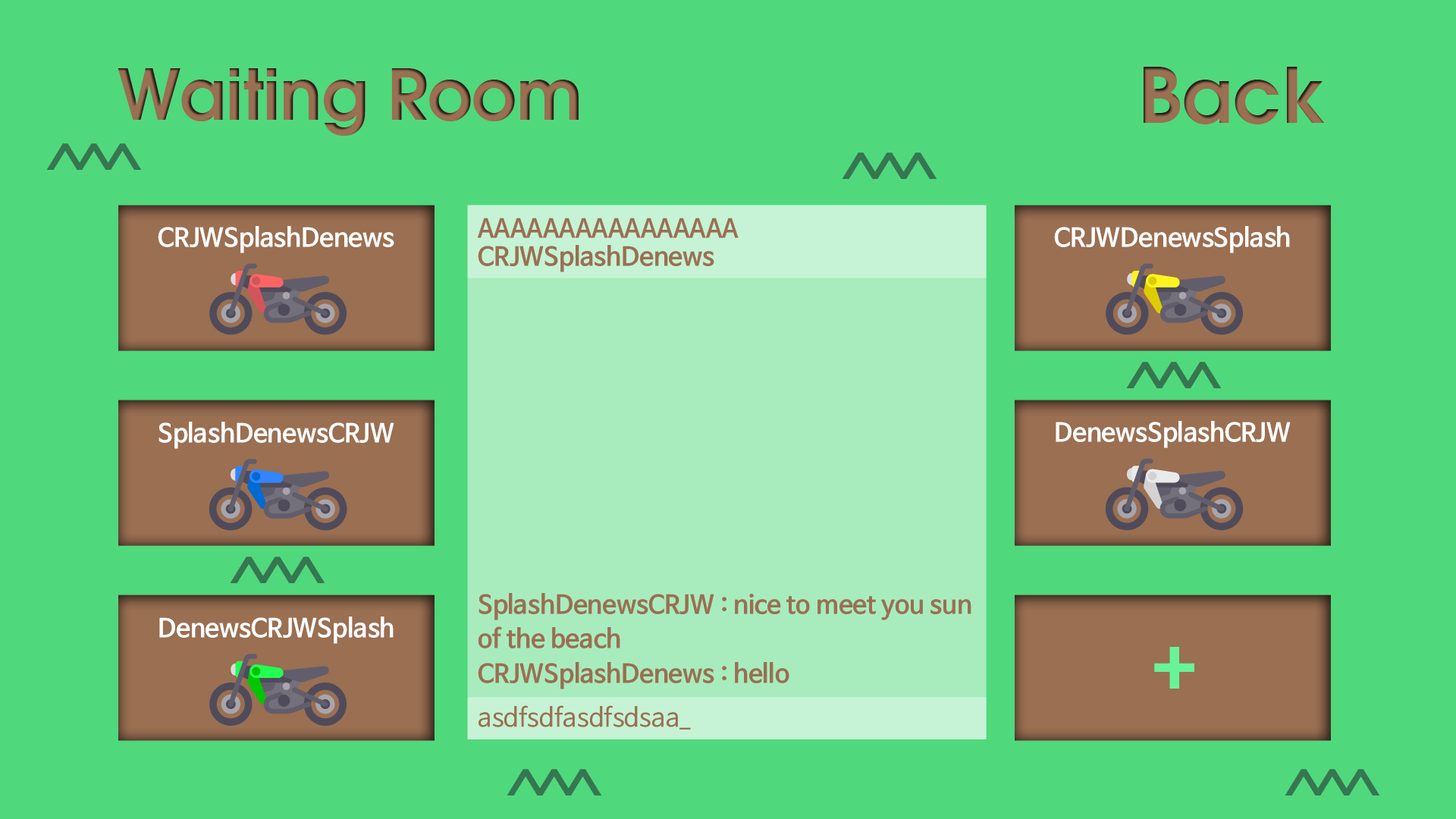
<style>
.page{position:relative;width:1456px;height:819px;background:#50d87d}
.page>*{position:absolute;margin:0}
.t1{font:69.5px "AvantGarde-Demi";color:#9a6f52}
.t2{font:25.3px "NanumBarunGothicOTFBold";color:#9a6f52}
.t3{font:25.3px "NanumBarunGothicOTFBold";color:#ffffff}
.t4{font:25.3px/34.8px "NanumBarunGothicOTFBold";color:#9a6f52}
.t5{font:82.2px "NanumBarunGothicOTFBold";color:#69f397}
.t6{font:25.3px "NanumBarunGothicOTF";color:#9a6f52}
</style>
<div class="page">
<p class="t1" style="left:118px;top:68px;width:461px;height:68px">Waiting Room</p>
<p class="t2" style="left:477px;top:218px;width:262px;height:20px">AAAAAAAAAAAAAAAA</p>
<p class="t3" style="left:158px;top:226px;width:236px;height:27px">CRJWSplashDenews</p>
<p class="t3" style="left:1054px;top:226px;width:236px;height:27px">CRJWDenewsSplash</p>
<p class="t2" style="left:478px;top:245px;width:236px;height:27px">CRJWSplashDenews</p>
<p class="t3" style="left:158px;top:422px;width:236px;height:27px">SplashDenewsCRJW</p>
<p class="t3" style="left:1056px;top:421px;width:235px;height:27px">DenewsSplashCRJW</p>
<p class="t4" style="left:478px;top:593px;width:493px;height:55px">SplashDenewsCRJW : nice to meet you sun<br>of the beach</p>
<p class="t3" style="left:159px;top:617px;width:235px;height:27px">DenewsCRJWSplash</p>
<p class="t5" style="left:1154px;top:647px;width:40px;height:42px">+</p>
<p class="t2" style="left:478px;top:662px;width:311px;height:27px">CRJWSplashDenews : hello</p>
<p class="t6" style="left:479px;top:705px;width:212px;height:25px">asdfsdfasdfsdsaa_</p>
</div>
